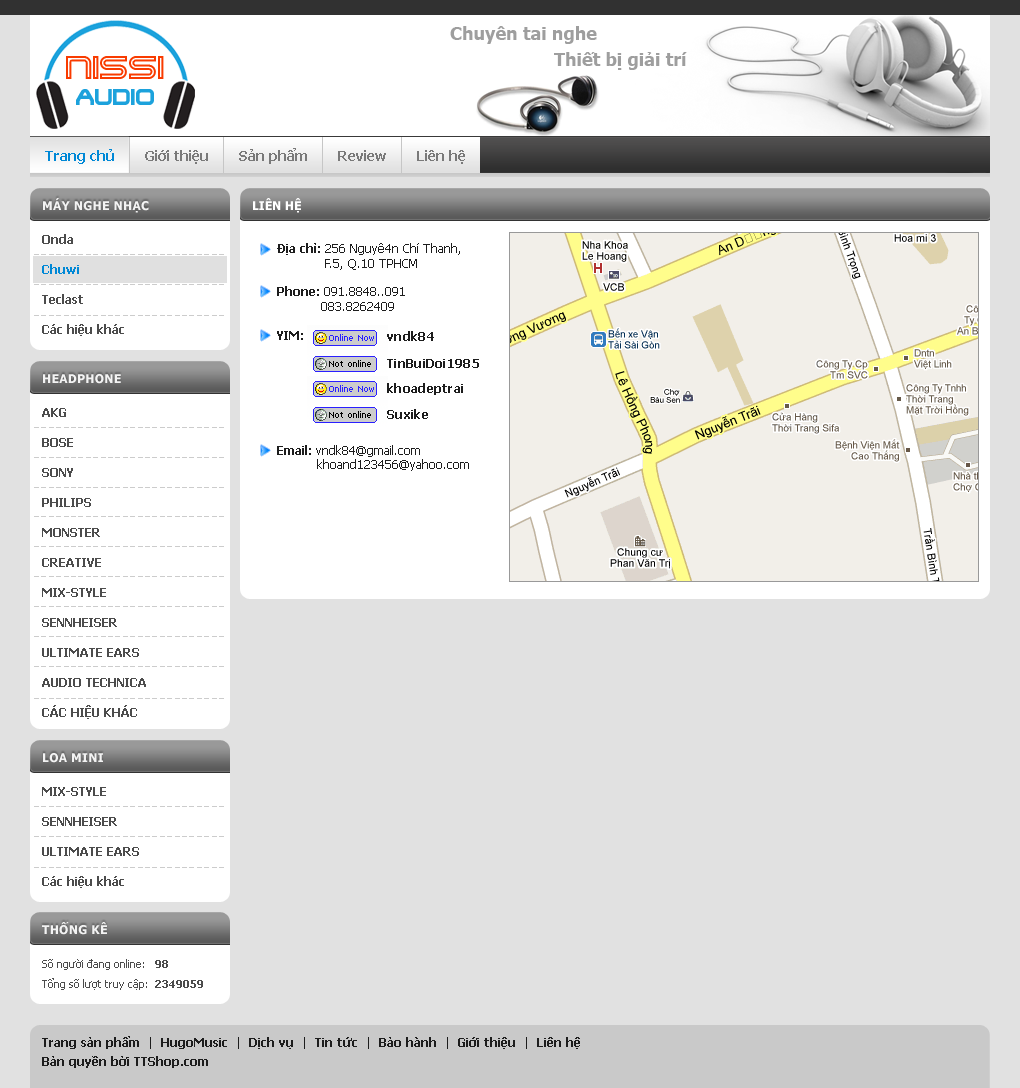
<style>
.page{position:relative;width:1020px;height:1088px;background:#e1e1e1}
.page>*{position:absolute;margin:0}
.t1{font:18px "Tahoma-Bold";color:#9e9e9e}
.t2{font:36px "TerminatorTwo"}
.t3{font:24px "TerminatorTwo";color:#1ca2dc}
.t4{font:14px "Tahoma-Bold";color:#0088d6}
.t5{font:14px "Tahoma-Bold";color:#797979}
.t6{font:12px "Tahoma-Bold";letter-spacing:0.025em;color:#f3f3f3;text-transform:uppercase}
.t7{font:12px "Tahoma-Bold";color:#ffffff;text-transform:uppercase}
.t8{font:12px/30px "Tahoma-Bold";color:#4c4c4c}
.t9{font:12px/30px "Tahoma-Bold";color:#0088d6}
.t10{font:12px "Tahoma";color:#1d1d1d}
.t11{font:12px "Tahoma-Bold";color:#1d1d1d}
.t12{font:12px "Tahoma-Bold";letter-spacing:0.025em;color:#1d1d1d}
.t13{font:11px/20px "Tahoma";color:#4c4c4c}
.t14{font:11px/20px "Tahoma-Bold";color:#4c4c4c}
</style>
<div class="page">
<p class="t1" style="left:450px;top:26px;width:147px;height:18px">Chuyên tai nghe</p>
<p class="t1" style="left:554px;top:52px;width:133px;height:18px">Thiết bị giải trí</p>
<p class="t2" style="left:66px;top:56px;width:98px;height:23px">Nissi</p>
<p class="t3" style="left:76px;top:89px;width:78px;height:16px">Audio</p>
<p class="t4" style="left:45px;top:149px;width:69px;height:15px">Trang chủ</p>
<p class="t5" style="left:145px;top:150px;width:63px;height:14px">Giới thiệu</p>
<p class="t5" style="left:239px;top:148px;width:68px;height:16px">Sản phẩm</p>
<p class="t5" style="left:338px;top:150px;width:48px;height:11px">Review</p>
<p class="t5" style="left:417px;top:150px;width:48px;height:14px">Liên hệ</p>
<p class="t6" style="left:43px;top:198px;width:106px;height:15px">Máy nghe nhạc</p>
<p class="t7" style="left:253px;top:198px;width:48px;height:15px">Liên hệ</p>
<p class="t8" style="left:42px;top:234px;width:82px;height:102px">Onda<br><span class="t9">Chuwi<br></span>Teclast<br>Các hiệu khác</p>
<p class="t10" style="left:277px;top:243px;width:192px;height:228px"><span class="t11">Địa chỉ:</span> 256 Nguyê4n Chí Thanh, <br>            F.5, Q.10 TPHCM<br> <br><span class="t11">Phone:</span> 091.8848..091<br>           083.8262409 <br><br><span class="t11">YIM:<br><br><br><br><br><br><br><br>Email:</span> vndk84@gmail.com<br>          khoand123456@yahoo.com</p>
<p class="t12" style="left:387px;top:331px;width:47px;height:10px">vndk84</p>
<p class="t12" style="left:387px;top:359px;width:92px;height:9px">TinBuiDoi1985</p>
<p class="t6" style="left:43px;top:374px;width:78px;height:10px">Headphone</p>
<p class="t12" style="left:387px;top:383px;width:76px;height:12px">khoadeptrai</p>
<p class="t8" style="left:42px;top:408px;width:104px;height:311px">AKG<br>BOSE<br>SONY<br>PHILIPS<br>MONSTER<br>CREATIVE<br>MIX-STYLE<br>SENNHEISER<br>ULTIMATE EARS<br>AUDIO TECHNICA<br>CÁC HIỆU KHÁC</p>
<p class="t12" style="left:387px;top:409px;width:41px;height:10px">Suxike</p>
<p class="t6" style="left:43px;top:753px;width:60px;height:10px">Loa mini</p>
<p class="t8" style="left:42px;top:787px;width:97px;height:101px">MIX-STYLE<br>SENNHEISER<br>ULTIMATE EARS<br>Các hiệu khác</p>
<p class="t6" style="left:42px;top:922px;width:65px;height:13px">Thống kê</p>
<p class="t13" style="left:42px;top:959px;width:161px;height:31px">Số người đang online:   <span class="t14">98<br></span>Tổng số lượt truy cập:  <span class="t14">2349059</span></p>
<p class="t11" style="left:42px;top:1036px;width:538px;height:13px">Trang sản phẩm<span class="t10">  |  </span>HugoMusic<span class="t10">  |  </span>Dịch vụ<span class="t10">  |  </span>Tin tức<span class="t10">  |  </span>Bảo hành<span class="t10">  |  </span>Giới thiệu<span class="t10">  |  </span>Liên hệ</p>
<p class="t11" style="left:42px;top:1056px;width:166px;height:12px">Bản quyền bởi TTShop.com</p>
</div>
